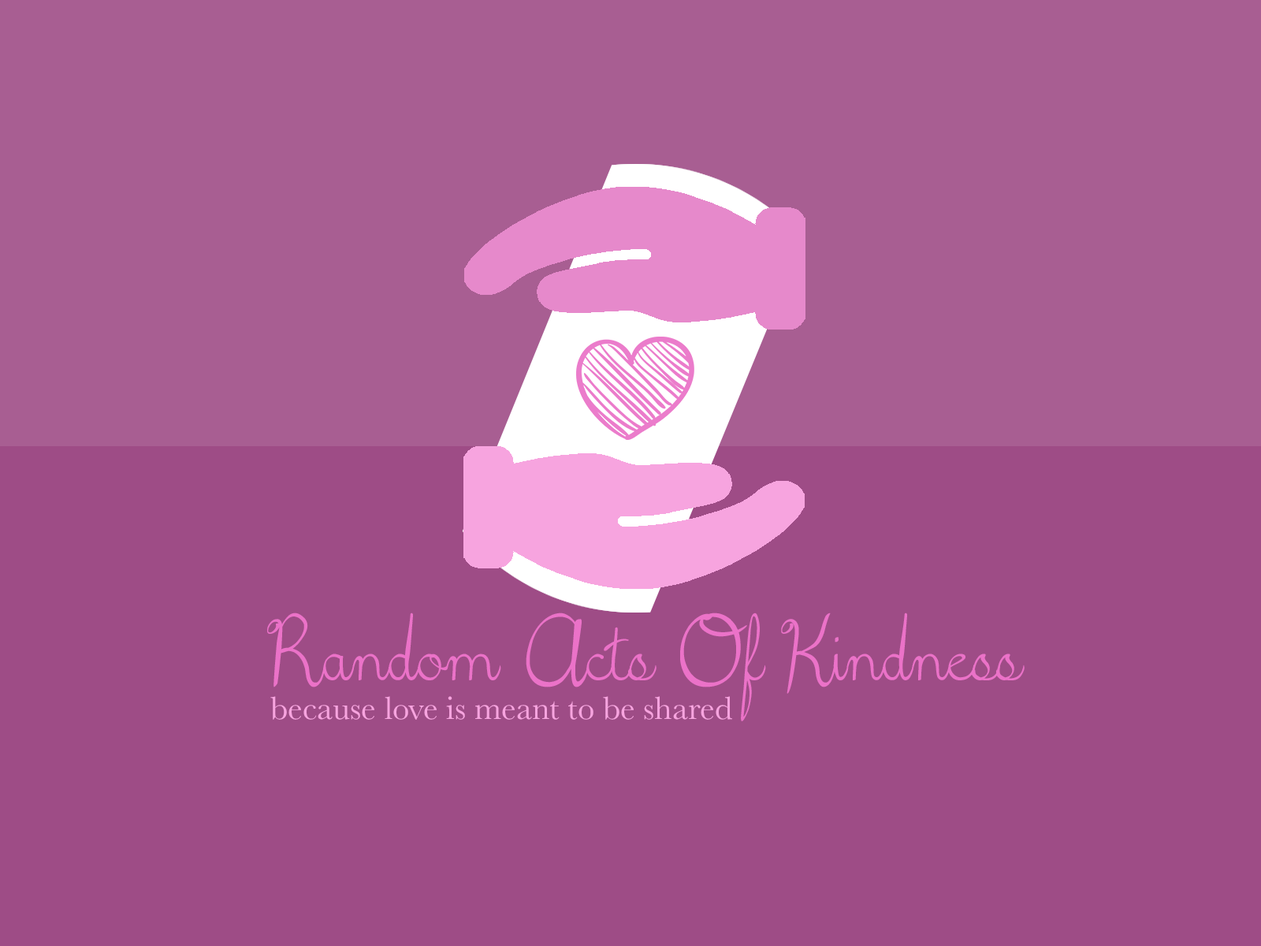
<style>
.page{position:relative;width:1261px;height:946px;background:#9e4c86}
.page>*{position:absolute;margin:0}
.t1{font:52.7px/76.2px "5thGradeCursive";color:#eb72c8}
.t2{font:33.4px "Baskerville";color:#f7a4df}
</style>
<div class="page">
<p class="t1" style="left:267px;top:612px;width:757px;height:109px;text-align:justify">Random Acts Of Kindness</p>
<p class="t2" style="left:270px;top:696px;width:462px;height:24px">because love is meant to be shared</p>
</div>
